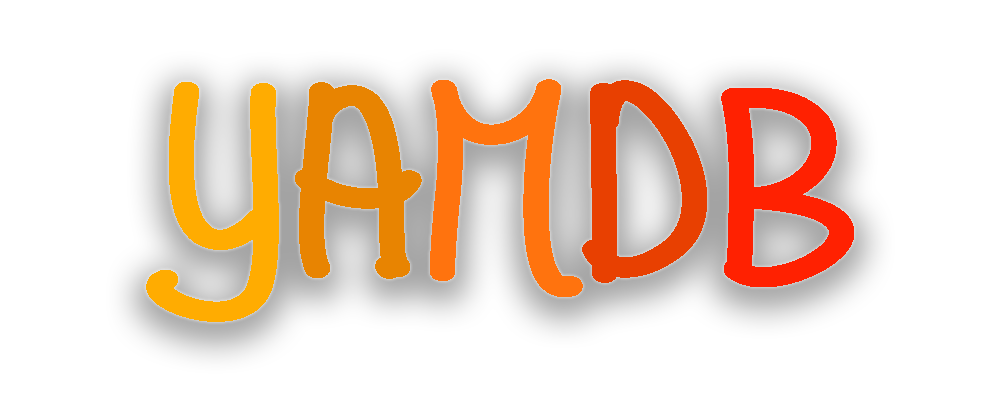
<style>
.page{position:relative;width:1000px;height:400px;background:#ffffff}
.page>*{position:absolute;margin:0}
.t1{font:245.8px "MRFfunkyfresh-Medium";color:#ffac01;font-weight:bold;scale:1.44 1}
.t2{font:245.8px "MRFfunkyfresh-Medium";color:#e88401;font-weight:bold;scale:1.44 1}
.t3{font:245.8px "MRFfunkyfresh-Medium";color:#ff730e;font-weight:bold;scale:1.44 1}
.t4{font:245.8px "MRFfunkyfresh-Medium";color:#e84001;font-weight:bold;scale:1.44 1}
.t5{font:245.8px "MRFfunkyfresh-Medium";color:#ff2101;font-weight:bold;scale:1.44 1}
</style>
<div class="page">
<p class="t1" style="left:146px;top:79px;width:708px;height:243px">Y<span class="t2">A</span><span class="t3">M</span><span class="t4">D</span><span class="t5">B</span></p>
</div>
